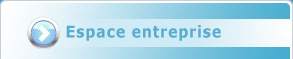
<style>
.page{position:relative;width:293px;height:59px}
.page>*{position:absolute;margin:0}
.t1{font:16.2px "Verdana-Bold";letter-spacing:0.05em;color:#5babce;scale:0.89 1}
</style>
<div class="page">
<p class="t1" style="left:66px;top:25px;width:155px;height:16px">Espace entreprise</p>
</div>
